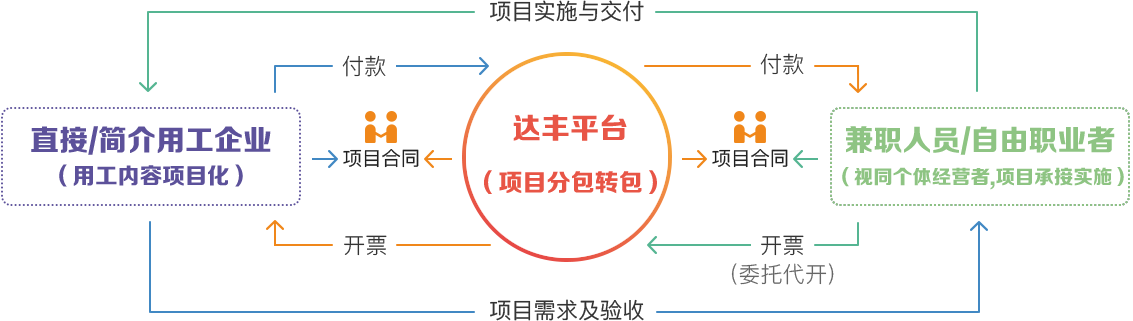
<style>
.page{position:relative;width:1133px;height:321px;background:#ffffff}
.page>*{position:absolute;margin:0}
.t1{font:29px "FZZDHJW--GB1-0";color:#5c519a;text-transform:uppercase}
.t2{font:29px "FZZDHJW--GB1-0";color:#e85546;text-transform:uppercase}
.t3{font:29px "FZZDHJW--GB1-0";color:#8ec483;text-transform:uppercase}
.t4{font:22.6px "FZZDHJW--GB1-0";color:#5c519a;text-transform:uppercase}
.t5{font:24.3px "FZZDHJW--GB1-0";color:#e85546;text-transform:uppercase}
.t6{font:19.6px "FZZDHJW--GB1-0";color:#8ec483;text-transform:uppercase}
</style>
<div class="page">
<p class="t1" style="left:31px;top:126px;width:240px;height:29px">直接/简介用工企业</p>
<p class="t2" style="left:513px;top:114px;width:114px;height:27px">达丰平台</p>
<p class="t3" style="left:846px;top:126px;width:269px;height:29px">兼职人员/自由职业者</p>
<p class="t4" style="left:59px;top:164px;width:184px;height:23px">（用工内容项目化）</p>
<p class="t5" style="left:484px;top:170px;width:173px;height:24px">（项目分包转包）</p>
<p class="t6" style="left:842px;top:167px;width:282px;height:23px">（视同个体经营者,项目承接实施）</p>
</div>
